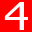
<style>
.page{position:relative;width:32px;height:32px;background:#ff0000}
.page>*{position:absolute;margin:0}
.t1{font:37.7px "Tahoma";color:#fffdfd;scale:1.21 1}
</style>
<div class="page">
<p class="t1" style="left:4px;top:2px;width:24px;height:28px">4</p>
</div>
